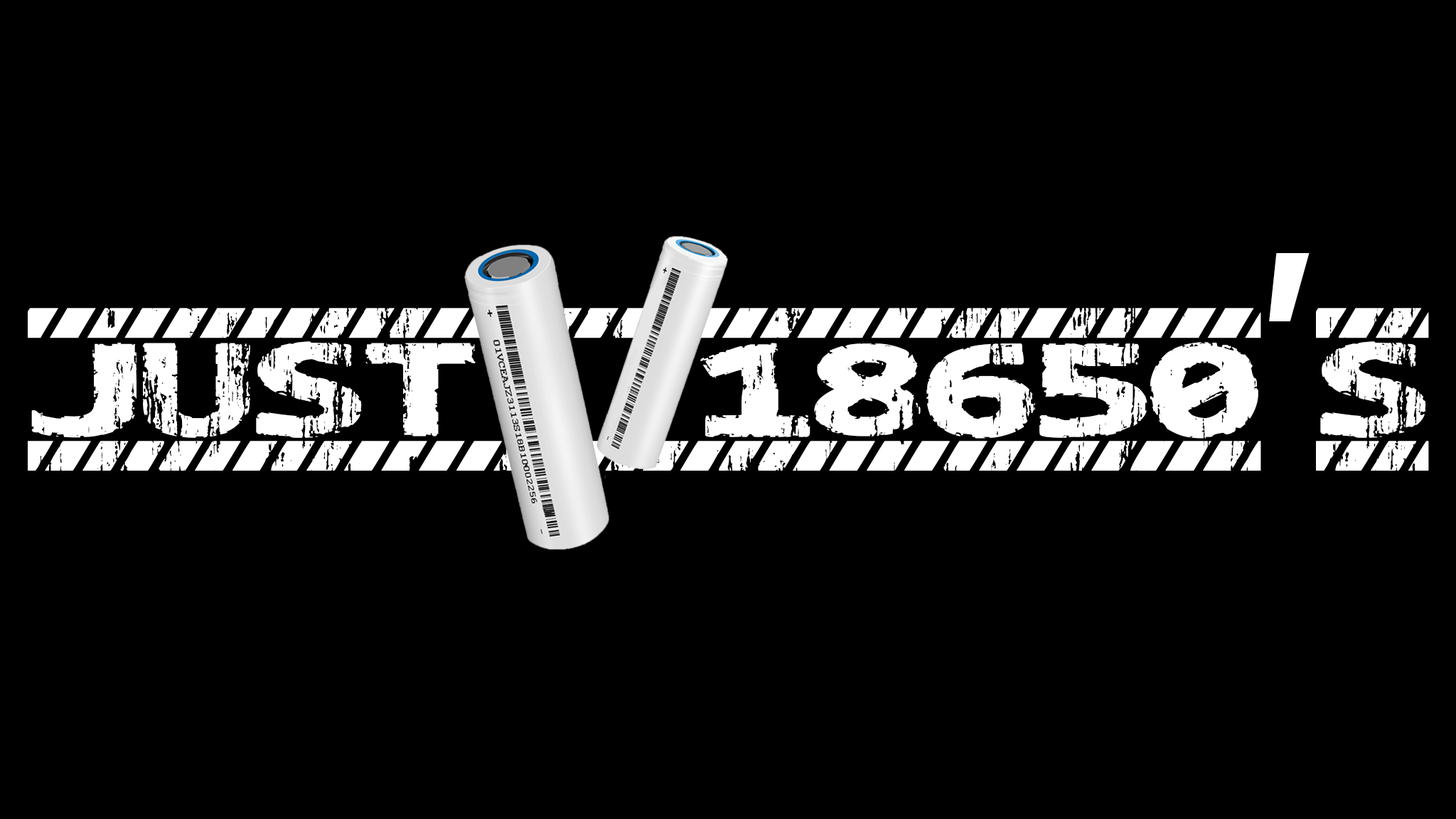
<style>
.page{position:relative;width:1456px;height:819px;background:#000000}
.page>*{position:absolute;margin:0}
.t1{font:284.7px "CAUTION";color:#ffffff}
.t2{font:284.7px "AgencyFB-Bold";color:#ffffff}
</style>
<div class="page">
<p class="t1" style="left:28px;top:253px;width:1401px;height:218px">just  18650<span class="t2">’</span>s</p>
</div>
